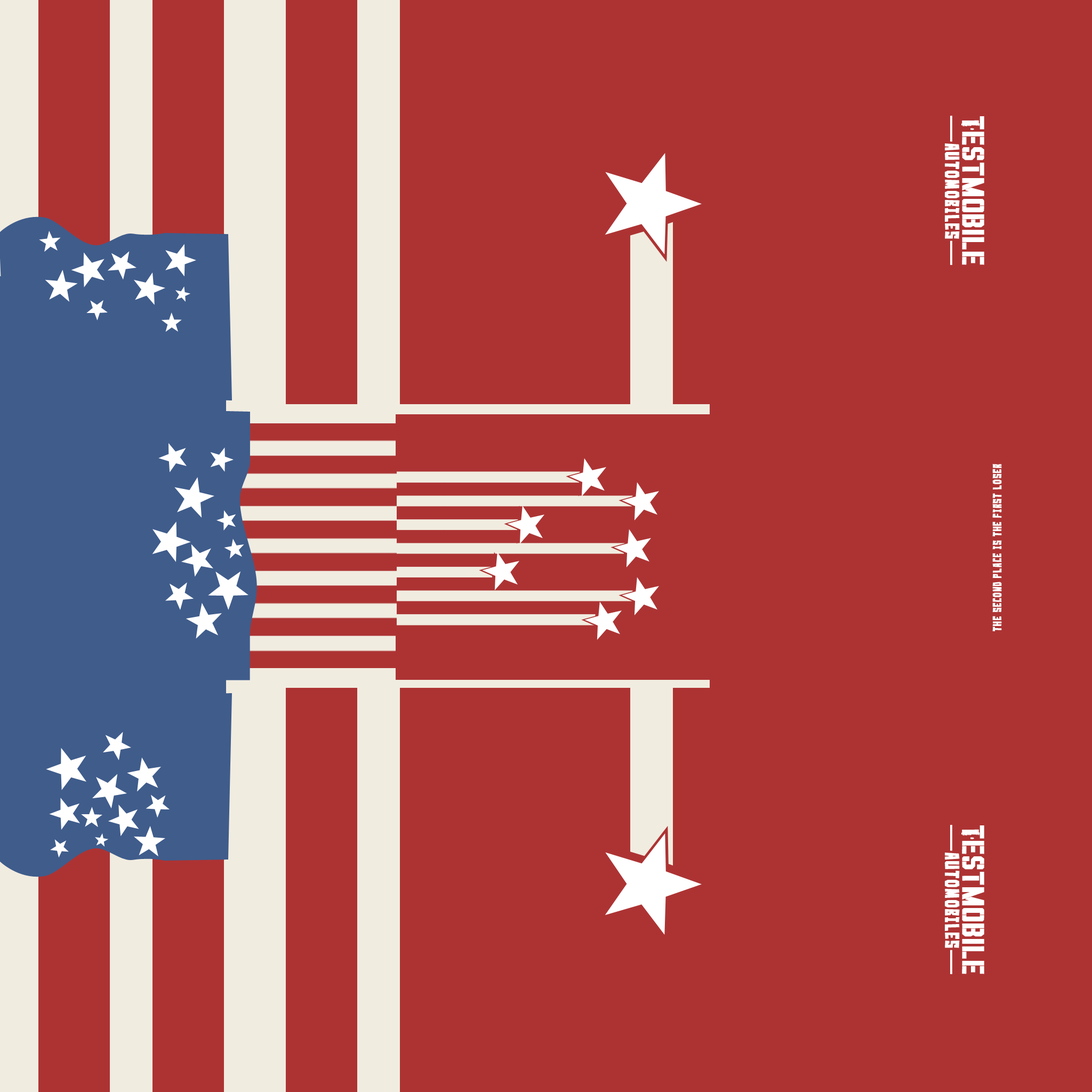
<style>
.page{position:relative;width:1092px;height:1092px;background:#ad3333}
.page>*{position:absolute;margin:0}
.t1{font:37.1px "VINCASTENCIL";letter-spacing:0.04em;color:#ffffff;font-weight:bold}
.t2{font:17.6px "Simple-Slum__G";letter-spacing:0.04em;color:#ffffff;font-weight:bold}
.t3{font:10.6px "Simple-Slum__G";letter-spacing:0.04em;color:#ffffff;font-weight:bold}
</style>
<div class="page">
<p class="t1" style="left:961px;top:116px;width:23px;height:149px;rotate:90deg">Testmobile</p>
<p class="t2" style="left:945px;top:143px;width:15px;height:96px;rotate:90deg">automobiles</p>
<p class="t3" style="left:992px;top:464px;width:10px;height:167px;rotate:-90deg">the Second place is the first loser</p>
<p class="t1" style="left:961px;top:825px;width:23px;height:149px;rotate:90deg">Testmobile</p>
<p class="t2" style="left:945px;top:853px;width:15px;height:95px;rotate:90deg">automobiles</p>
</div>
